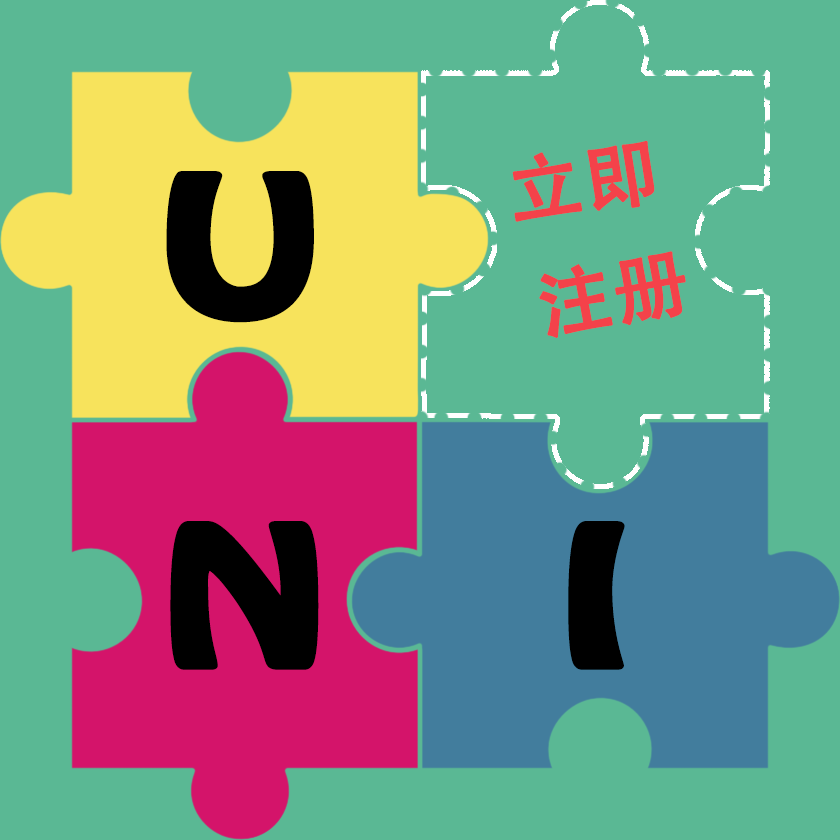
<style>
.page{position:relative;width:840px;height:840px;background:#5ab894}
.page>*{position:absolute;margin:0}
.t1{font:73.1px "AdobeHeitiStd-Regular";color:#f4424a;font-weight:bold;scale:1.03 1}
.t2{font:172.8px "HoboStd";color:#000000;font-weight:bold;scale:1.34 1}
</style>
<div class="page">
<p class="t1" style="left:512px;top:140px;width:143px;height:82px;rotate:-9deg">立即</p>
<p class="t2" style="left:166px;top:171px;width:148px;height:152px">U</p>
<p class="t1" style="left:539px;top:251px;width:147px;height:87px;rotate:-11deg">注册</p>
<p class="t2" style="left:170px;top:521px;width:149px;height:149px">N</p>
<p class="t2" style="left:568px;top:521px;width:57px;height:149px">I</p>
</div>
